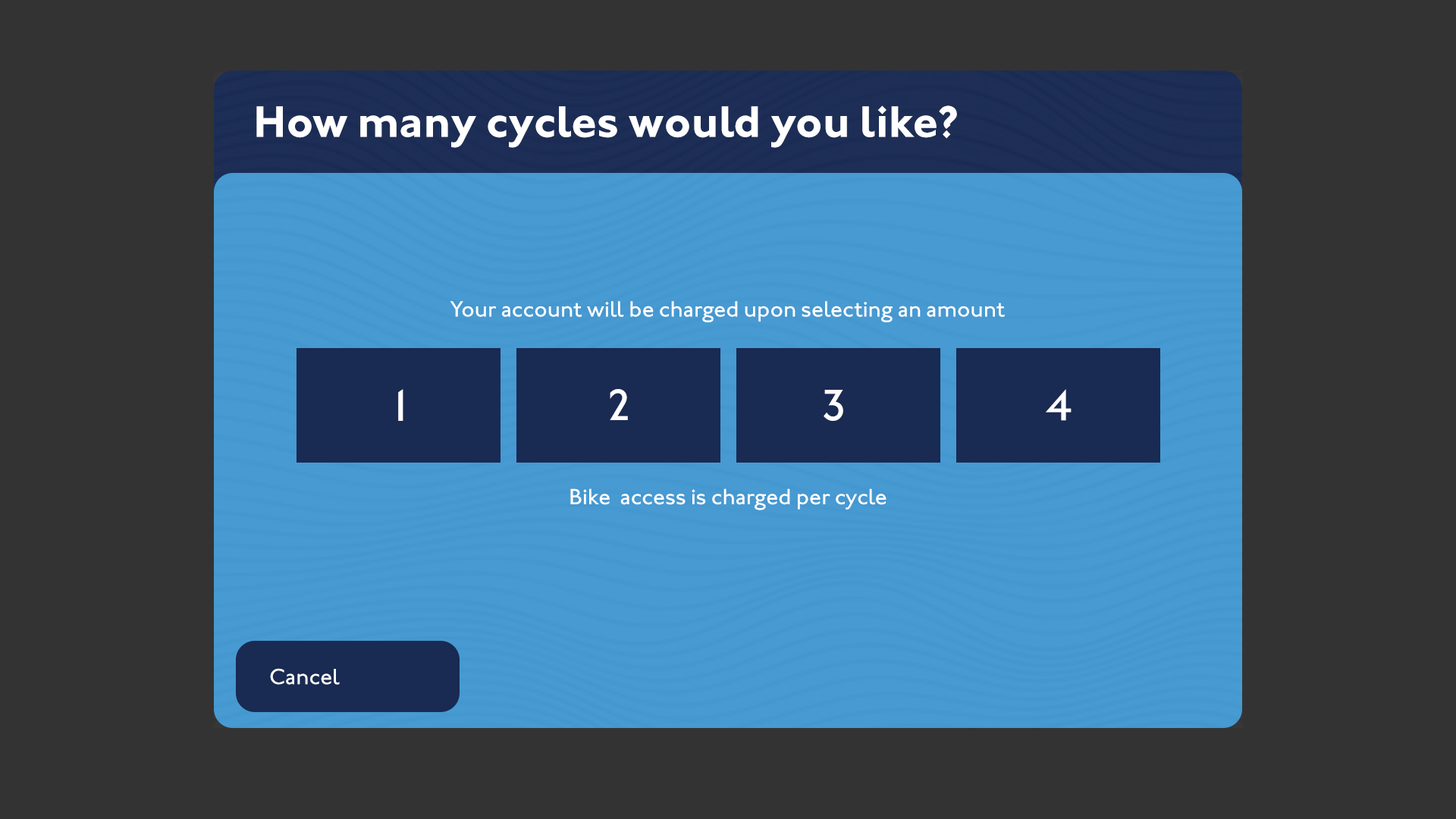
<style>
.page{position:relative;width:1456px;height:819px;background:#333333}
.page>*{position:absolute;margin:0}
.t1{font:45.5px "JohnstonITCStd-Bold";color:#ffffff}
.t2{font:22.7px "JohnstonITCStd-Medium";color:#ffffff}
.t3{font:45.5px "JohnstonITCStd-Medium";color:#ffffff}
</style>
<div class="page">
<p class="t1" style="left:256px;top:105px;width:701px;height:43px">How many cycles would you like?</p>
<p class="t2" style="left:450px;top:301px;width:555px;height:21px">Your account will be charged upon selecting an amount</p>
<p class="t3" style="left:398px;top:389px;width:5px;height:32px">1</p>
<p class="t3" style="left:610px;top:389px;width:18px;height:31px">2</p>
<p class="t3" style="left:824px;top:390px;width:19px;height:31px">3</p>
<p class="t3" style="left:1046px;top:389px;width:26px;height:32px">4</p>
<p class="t2" style="left:570px;top:488px;width:316px;height:22px">Bike  access is charged per cycle</p>
<p class="t2" style="left:270px;top:668px;width:70px;height:17px">Cancel</p>
</div>
